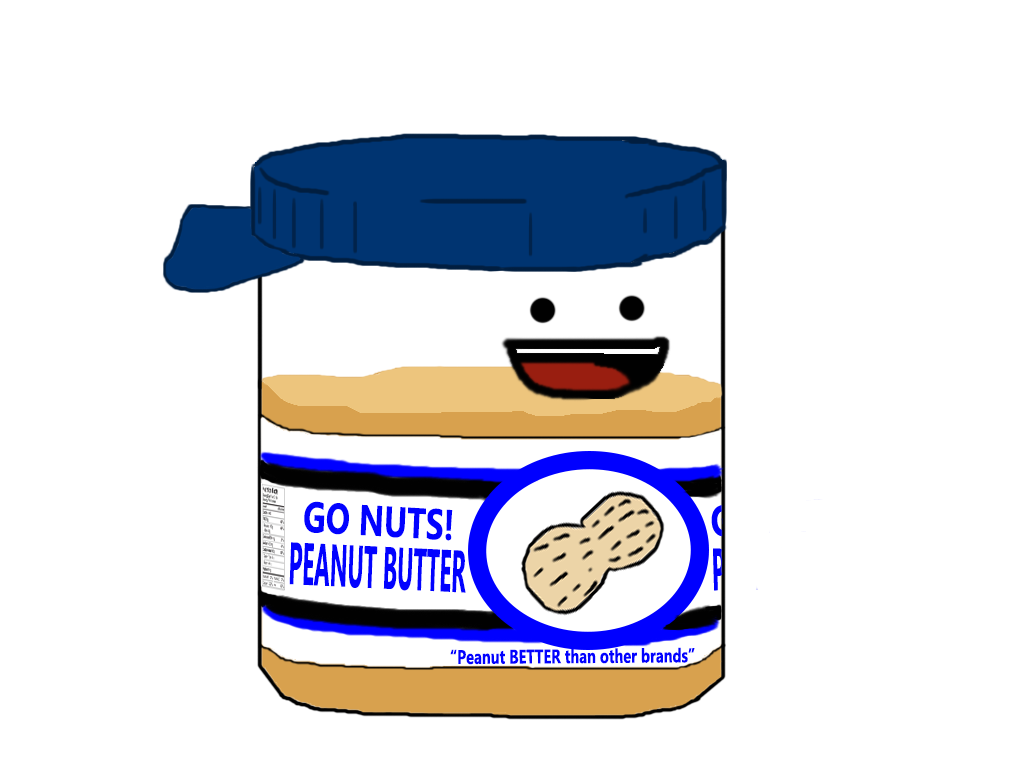
<style>
.page{position:relative;width:1024px;height:768px;background:#ffffff}
.page>*{position:absolute;margin:0}
.t1{font:42.9px "LaoUI-Bold";color:#0202ff;scale:0.74 1}
.t2{font:59.5px "LaoUI-Bold";color:#0202ff;scale:0.38 1}
.t3{font:19.6px "LaoUI-Bold";color:#0202ff;scale:0.74 1}
</style>
<div class="page">
<p class="t1" style="left:304px;top:501px;width:149px;height:40px;rotate:3deg">GO NUTS!</p>
<p class="t2" style="left:289px;top:542px;width:177px;height:51px;rotate:3deg">PEANUT BUTTER</p>
<p class="t3" style="left:450px;top:647px;width:245px;height:18px">“Peanut BETTER than other brands”</p>
</div>
